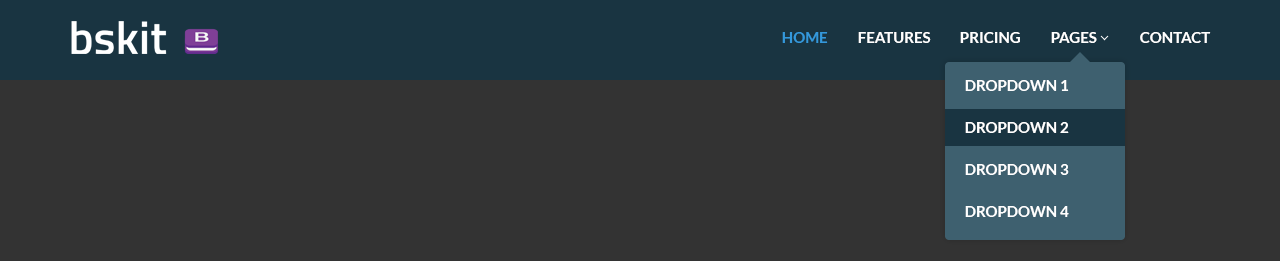
<style>
.page{position:relative;width:1280px;height:261px;background:#333333}
.page>*{position:absolute;margin:0}
.t1{font:15px "Lato-Bold";color:#3498db}
.t2{font:15px "Lato-Bold";color:#ffffff}
</style>
<div class="page">
<p class="t1" style="left:782px;top:32px;width:46px;height:11px">HOME</p>
<p class="t2" style="left:858px;top:32px;width:73px;height:11px">FEATURES</p>
<p class="t2" style="left:960px;top:32px;width:60px;height:11px">PRICING</p>
<p class="t2" style="left:1051px;top:32px;width:46px;height:11px">PAGES</p>
<p class="t2" style="left:1140px;top:32px;width:71px;height:11px">CONTACT</p>
<p class="t2" style="left:965px;top:80px;width:104px;height:11px">DROPDOWN 1</p>
<p class="t2" style="left:965px;top:122px;width:104px;height:11px">DROPDOWN 2</p>
<p class="t2" style="left:965px;top:164px;width:104px;height:11px">DROPDOWN 3</p>
<p class="t2" style="left:965px;top:206px;width:104px;height:11px">DROPDOWN 4</p>
</div>
